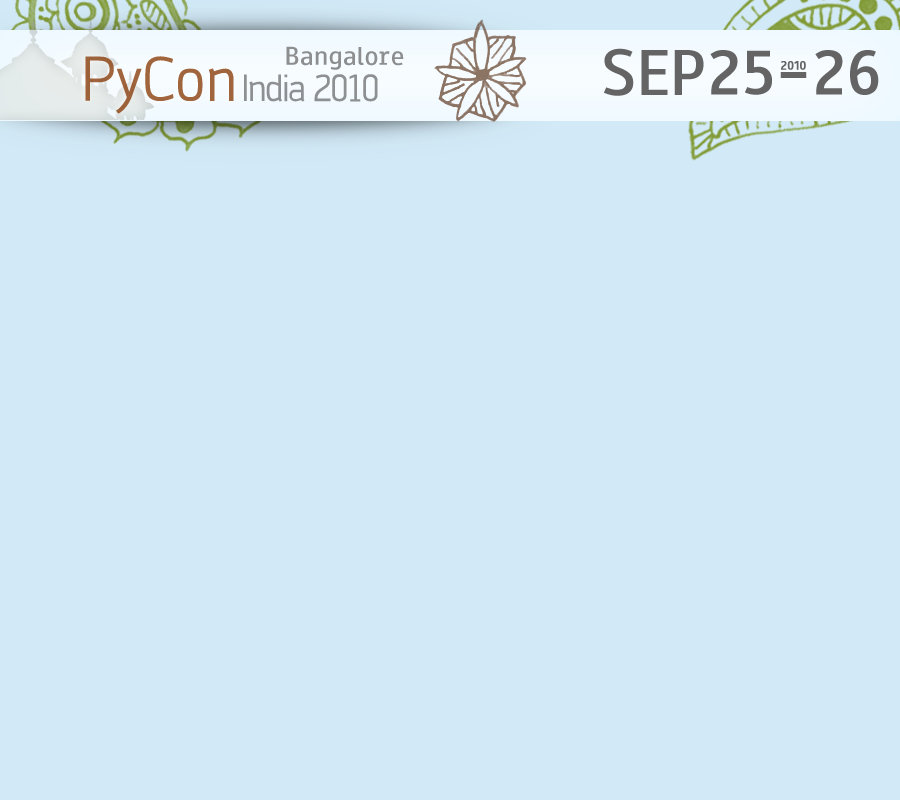
<style>
.page{position:relative;width:900px;height:800px;background:#d2eaf7}
.page>*{position:absolute;margin:0}
.t1{font:30px "PaneuropaRoad";color:#8c8e8f}
.t2{font:75px "PaneuropaRoad";color:#646464}
.t3{font:72px "PaneuropaRoad";color:#646464;font-weight:bold}
.t4{font:60px "Engel-Lightltd";color:#a0653d;font-weight:bold}
.t5{font:14px "PaneuropaRoad";color:#646464;font-weight:bold}
.t6{font:36px "Engel-Lightltd";letter-spacing:-0.05em;color:#8e9092;font-weight:bold}
</style>
<div class="page">
<p class="t1" style="left:286px;top:46px;width:118px;height:24px">Bangalore</p>
<p class="t2" style="left:603px;top:48px;width:101px;height:48px">SEP</p>
<p class="t3" style="left:710px;top:50px;width:169px;height:45px">25-26</p>
<p class="t4" style="left:85px;top:56px;width:149px;height:58px">PyCon</p>
<p class="t5" style="left:781px;top:61px;width:25px;height:9px">2010</p>
<p class="t6" style="left:244px;top:74px;width:134px;height:28px">India 2010</p>
</div>
